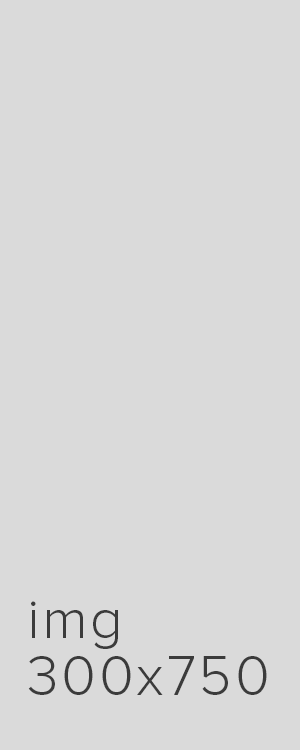
<style>
.page{position:relative;width:300px;height:750px;background:#dadada}
.page>*{position:absolute;margin:0}
.t1{font:57.5px/57px "ProximaNova-Light";letter-spacing:0.05em;color:#3b3b3b}
</style>
<div class="page">
<p class="t1" style="left:28px;top:601px;width:239px;height:94px">img <br>300x750</p>
</div>
